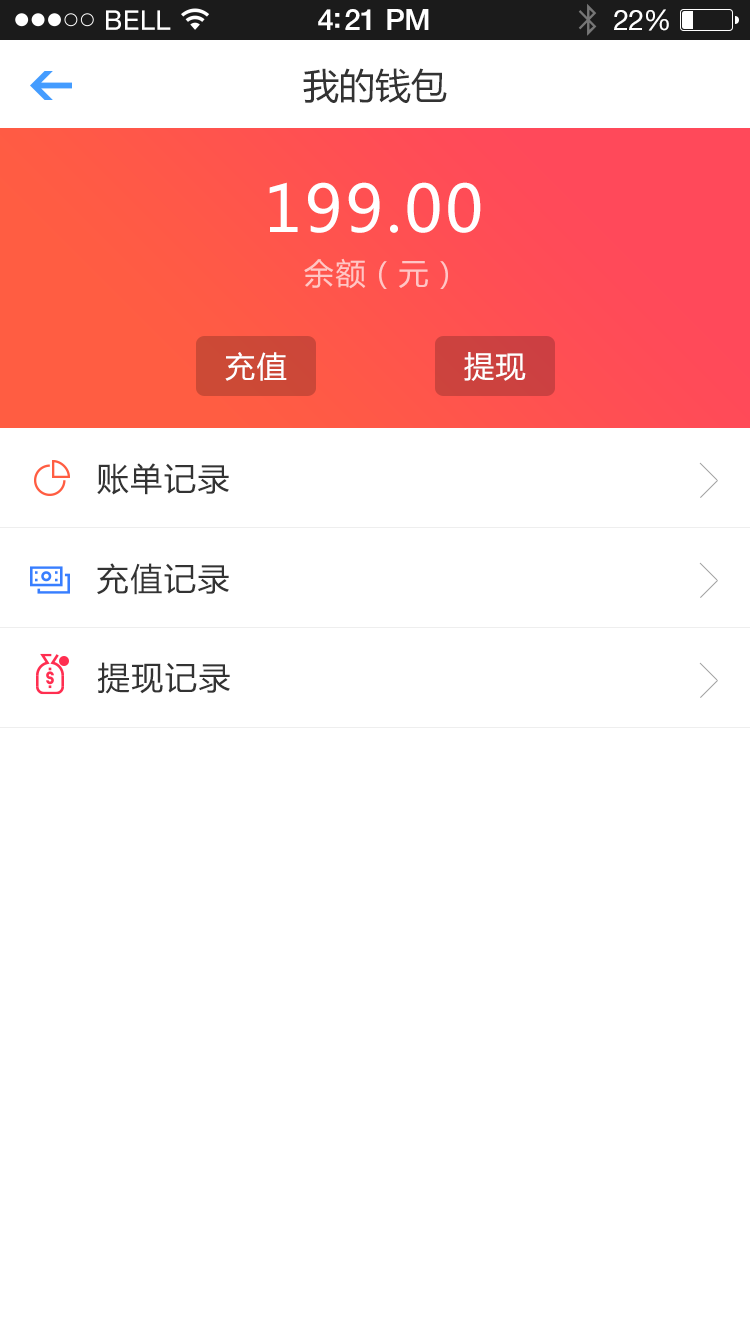
<style>
.page{position:relative;width:750px;height:1334px;background:#ffffff}
.page>*{position:absolute;margin:0}
.t1{font:36px "MicrosoftYaHei";color:#333333}
.t2{font:64px "MicrosoftYaHei";letter-spacing:0.05em;color:#ffffff}
.t3{font:30px "MicrosoftYaHei";letter-spacing:0.05em;color:#ffc6c5}
.t4{font:30px "MicrosoftYaHei";letter-spacing:0.05em;color:#ffffff}
.t5{font:32px "MicrosoftYaHei";letter-spacing:0.05em;color:#333333}
</style>
<div class="page">
<p class="t1" style="left:303px;top:68px;width:144px;height:35px">我的钱包</p>
<p class="t2" style="left:269px;top:182px;width:212px;height:51px">199.00</p>
<p class="t3" style="left:304px;top:258px;width:144px;height:31px">余额（元）</p>
<p class="t4" style="left:225px;top:352px;width:62px;height:29px">充值</p>
<p class="t4" style="left:464px;top:352px;width:62px;height:29px">提现</p>
<p class="t5" style="left:97px;top:463px;width:132px;height:32px">账单记录</p>
<p class="t5" style="left:97px;top:563px;width:132px;height:32px">充值记录</p>
<p class="t5" style="left:98px;top:662px;width:132px;height:32px">提现记录</p>
</div>
